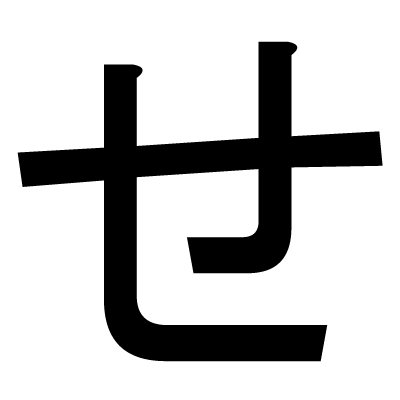
<style>
.page{position:relative;width:400px;height:400px;background:#ffffff}
.page>*{position:absolute;margin:0}
.t1{font:416.7px "MS-PGothic";color:#000000}
</style>
<div class="page">
<p class="t1" style="left:17px;top:41px;width:366px;height:321px">せ</p>
</div>
